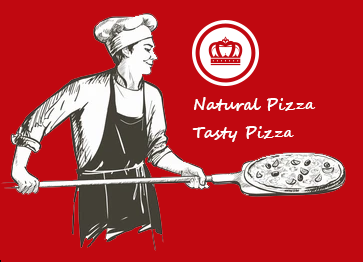
<style>
.page{position:relative;width:363px;height:262px;background:#c00810}
.page>*{position:absolute;margin:0}
.t1{font:16px "SegoeScript-Bold";color:#ffffff}
</style>
<div class="page">
<p class="t1" style="left:192px;top:97px;width:124px;height:45px">Natural Pizza<br>Tasty Pizza</p>
</div>
